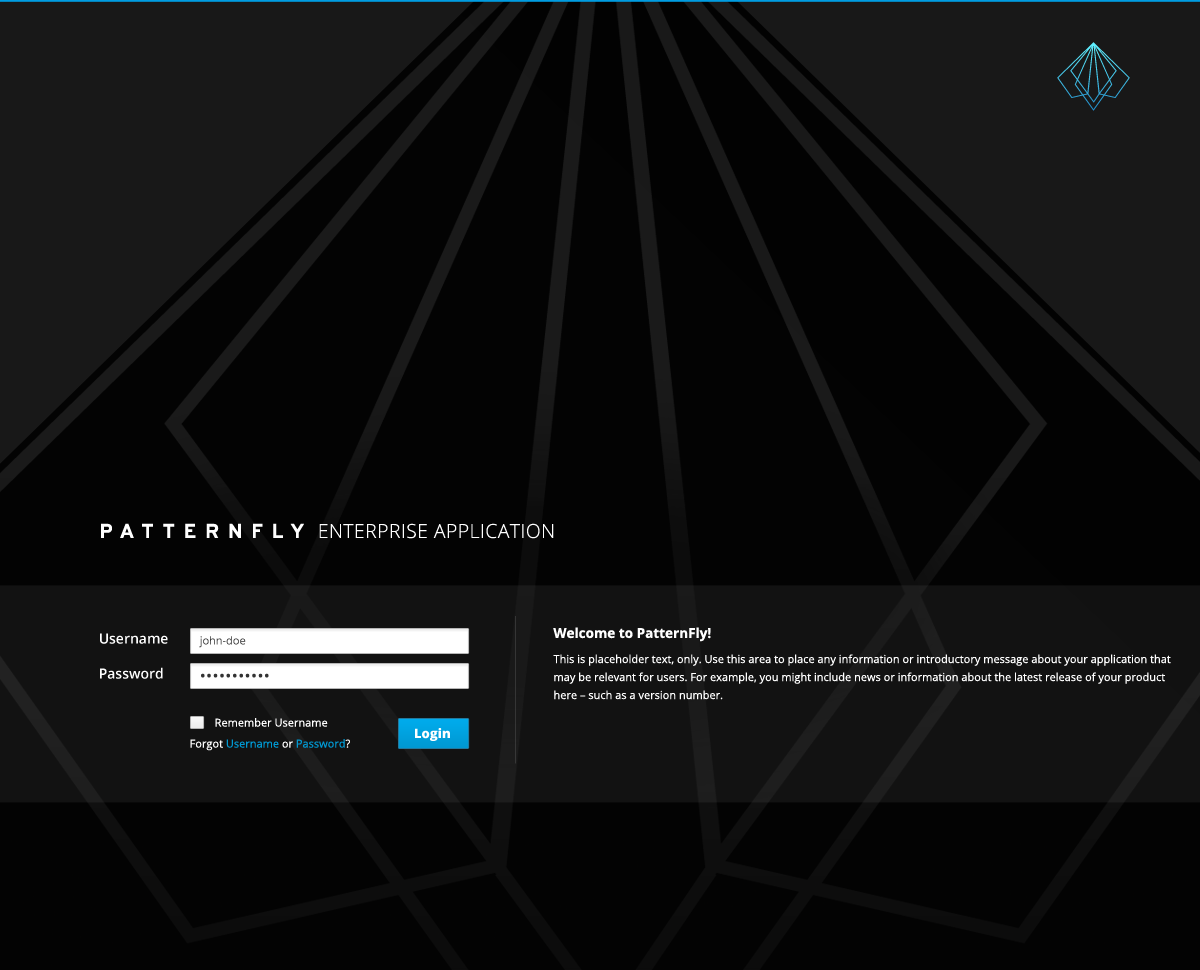
<style>
.page{position:relative;width:1200px;height:970px;background:#030303}
.page>*{position:absolute;margin:0}
.t1{font:19.3px "OpenSans-Light";letter-spacing:0.025em;color:#ffffff}
.t2{font:13.5px "OpenSans-Bold";color:#ffffff}
.t3{font:14px "OpenSans-Semibold";color:#ffffff}
.t4{font:11px "OpenSans"}
.t5{font:11px/18px "OpenSans";color:#ffffff}
.t6{font:16px "OpenSans";letter-spacing:0.025em;color:#333333}
.t7{font:11px "OpenSans";color:#ffffff}
.t8{font:13px "OpenSans-Extrabold";color:#ffffff}
.t9{font:11px "OpenSans";color:#0099d3}
</style>
<div class="page">
<p class="t1" style="left:319px;top:523px;width:235px;height:16px">ENTERPRISE APPLICATION</p>
<p class="t2" style="left:553px;top:627px;width:158px;height:15px">Welcome to PatternFly!</p>
<p class="t3" style="left:100px;top:633px;width:68px;height:11px">Username</p>
<p class="t4" style="left:199px;top:636px;width:47px;height:12px">john-doe</p>
<p class="t5" style="left:553px;top:654px;width:618px;height:46px">This is placeholder text, only. Use this area to place any information or introductory message about your application that may be relevant for users. For example, you might include news or information about the latest release of your product here – such as a version number.</p>
<p class="t3" style="left:100px;top:667px;width:63px;height:12px">Password</p>
<p class="t6" style="left:201px;top:673px;width:68px;height:5px">•••••••••••</p>
<p class="t7" style="left:215px;top:718px;width:113px;height:9px">Remember Username</p>
<p class="t8" style="left:415px;top:728px;width:35px;height:13px">Login</p>
<p class="t9" style="left:190px;top:739px;width:160px;height:12px"><span class="t7">Forgot </span>Username <span class="t7">or </span>Password<span class="t7">?</span></p>
</div>
